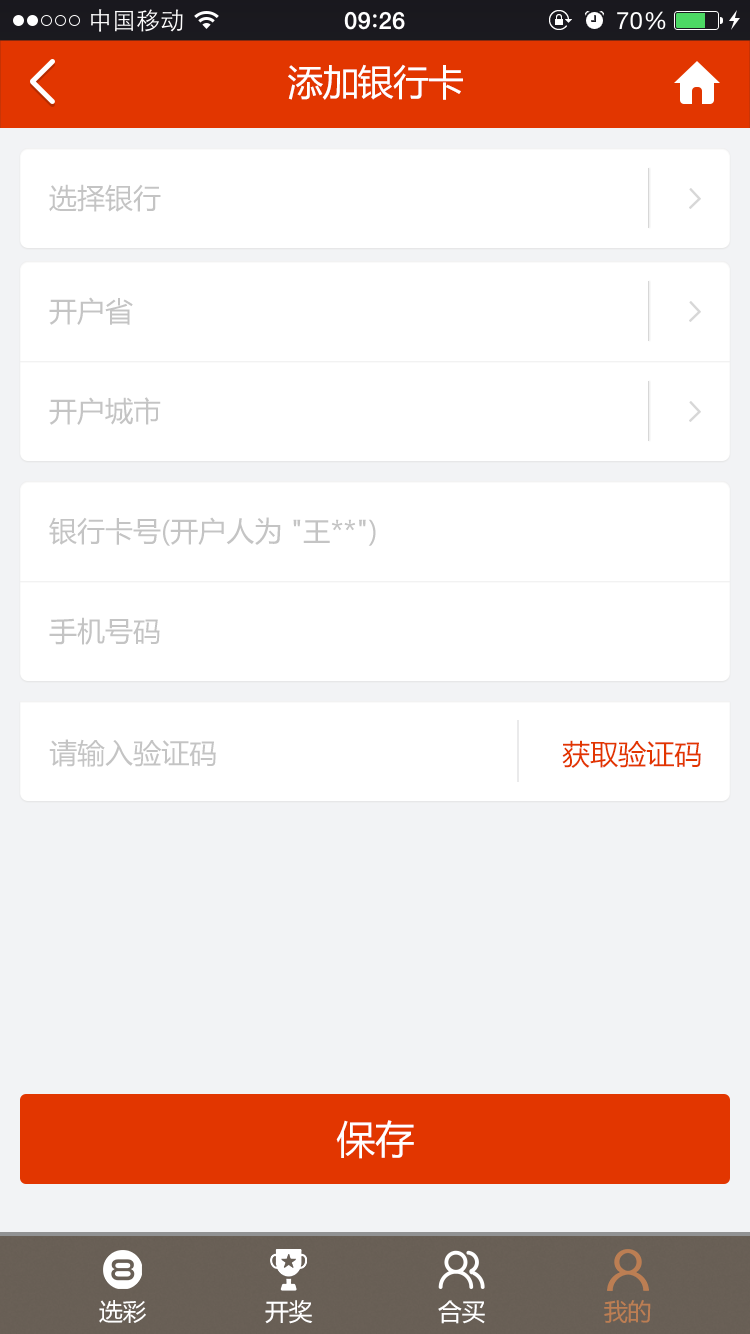
<style>
.page{position:relative;width:750px;height:1334px;background:#ffffff}
.page>*{position:absolute;margin:0}
.t1{font:36px "MicrosoftYaHei";letter-spacing:-0.025em;color:#ffffff}
.t2{font:28px "MicrosoftYaHei";color:#c4c4c4}
.t3{font:28px "MicrosoftYaHei";color:#e23600}
.t4{font:39px "MicrosoftYaHei";color:#ffffff}
.t5{font:24px "MicrosoftYaHei";letter-spacing:-0.025em;color:#ffffff}
.t6{font:24px "MicrosoftYaHei";letter-spacing:-0.025em;color:#bc7e53}
</style>
<div class="page">
<p class="t1" style="left:288px;top:64px;width:175px;height:36px">添加银行卡</p>
<p class="t2" style="left:49px;top:184px;width:112px;height:28px">选择银行</p>
<p class="t2" style="left:49px;top:297px;width:84px;height:28px">开户省</p>
<p class="t2" style="left:49px;top:397px;width:112px;height:28px">开户城市</p>
<p class="t2" style="left:49px;top:517px;width:327px;height:29px">银行卡号(开户人为 "王**")</p>
<p class="t2" style="left:49px;top:617px;width:111px;height:28px">手机号码</p>
<p class="t2" style="left:49px;top:739px;width:167px;height:28px">请输入验证码</p>
<p class="t3" style="left:562px;top:740px;width:139px;height:28px">获取验证码</p>
<p class="t4" style="left:336px;top:1120px;width:78px;height:39px">保存</p>
<p class="t5" style="left:99px;top:1300px;width:47px;height:23px">选彩</p>
<p class="t5" style="left:265px;top:1300px;width:48px;height:24px">开奖</p>
<p class="t5" style="left:438px;top:1300px;width:47px;height:24px">合买</p>
<p class="t6" style="left:604px;top:1300px;width:47px;height:23px">我的</p>
</div>
